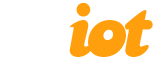
<style>
.page{position:relative;width:160px;height:60px;background:#ffffff}
.page>*{position:absolute;margin:0}
.t1{font:96.7px "Gvtime-Regular";color:#ff9f0d}
.t2{font:96.7px "Gvtime-Regular";color:#ffffff}
</style>
<div class="page">
<p class="t1" style="left:5px;top:2px;width:148px;height:55px"><span class="t2">oz</span>iot</p>
</div>
